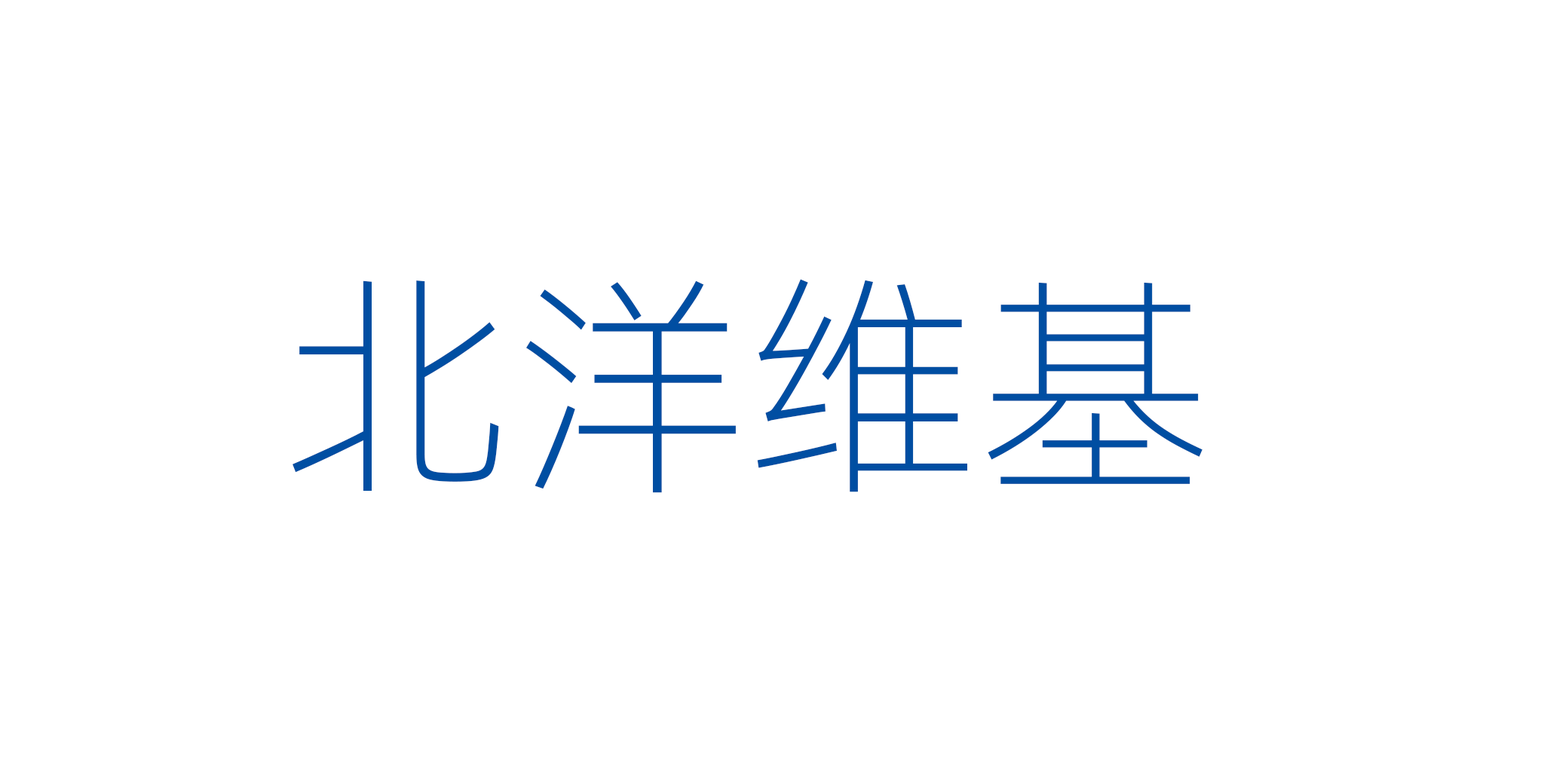
<style>
.page{position:relative;width:1544px;height:772px;background:#ffffff}
.page>*{position:absolute;margin:0}
.t1{font:236.5px "Alibaba-PuHuiTi-L";color:#004ea2}
</style>
<div class="page">
<p class="t1" style="left:293px;top:279px;width:910px;height:214px">北洋维基</p>
</div>
